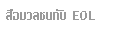
<style>
.page{position:relative;width:117px;height:30px;background:#ffffff}
.page>*{position:absolute;margin:0}
.t1{font:20px "LilyUPC";color:#999999}
</style>
<div class="page">
<p class="t1" style="left:6px;top:9px;width:60px;height:11px">สื่อมวลชนกับ</p>
<p class="t1" style="left:73px;top:11px;width:22px;height:9px">EOL</p>
</div>
